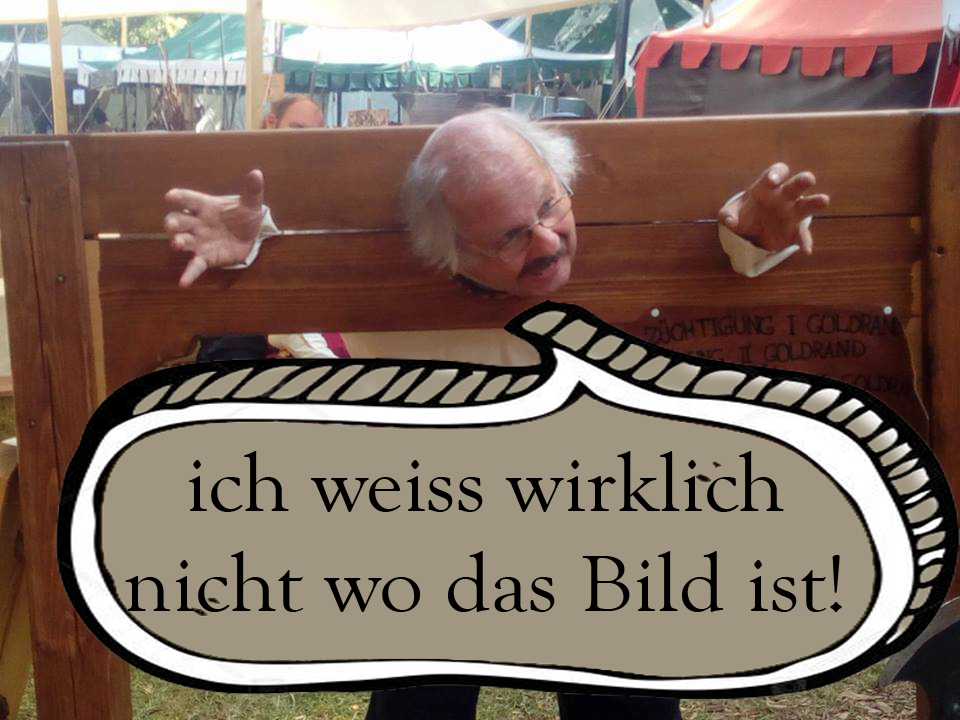
<style>
.page{position:relative;width:960px;height:720px;background:#a09681}
.page>*{position:absolute;margin:0}
.t1{font:83.5px "GoudyOldStyleT-Regular";color:#000000;scale:1.05 1}
</style>
<div class="page">
<p class="t1" style="left:125px;top:451px;width:717px;height:161px;text-align:center">ich weiss wirklich<br>nicht wo das Bild ist!</p>
</div>
